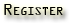
<style>
.page{position:relative;width:70px;height:23px}
.page>*{position:absolute;margin:0}
.t1{font:17px "OCRAExtended";color:#000000;font-variant:small-caps}
</style>
<div class="page">
<p class="t1" style="left:4px;top:4px;width:59px;height:11px">Register</p>
</div>
